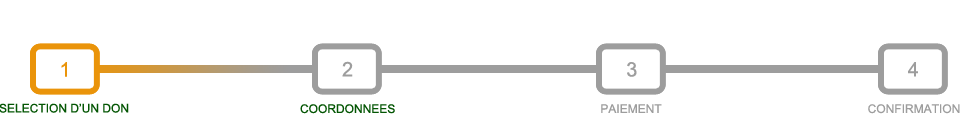
<style>
.page{position:relative;width:960px;height:120px;background:#ffffff}
.page>*{position:absolute;margin:0}
.t1{font:20px "ArialMT";color:#ea940a}
.t2{font:20px "ArialMT";color:#9d9d9d}
.t3{font:12px "ArialMT";color:#045604}
.t4{font:12px "ArialMT";color:#9d9d9d}
</style>
<div class="page">
<p class="t1" style="left:61px;top:62px;width:6px;height:15px">1</p>
<p class="t2" style="left:342px;top:61px;width:11px;height:16px">2</p>
<p class="t2" style="left:627px;top:62px;width:10px;height:15px">3</p>
<p class="t2" style="left:908px;top:62px;width:10px;height:15px">4</p>
<p class="t3" style="left:0px;top:103px;width:129px;height:10px">SELECTION D’UN DON</p>
<p class="t3" style="left:300px;top:104px;width:95px;height:10px">COORDONNEES</p>
<p class="t4" style="left:601px;top:104px;width:61px;height:9px">PAIEMENT</p>
<p class="t4" style="left:868px;top:104px;width:92px;height:10px">CONFIRMATION</p>
</div>
